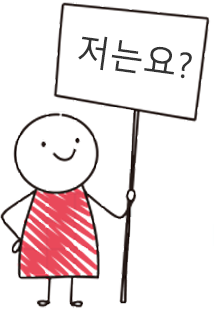
<style>
.page{position:relative;width:214px;height:309px;background:#ffffff}
.page>*{position:absolute;margin:0}
.t1{font:35.2px "MalgunGothic";color:#333333;scale:0.96 1}
</style>
<div class="page">
<p class="t1" style="left:78px;top:36px;width:114px;height:43px;rotate:8deg">저는요?</p>
</div>
